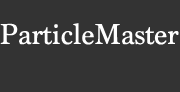
<style>
.page{position:relative;width:180px;height:92px;background:#333333}
.page>*{position:absolute;margin:0}
.t1{font:30px "Marion-Regular";color:#ffffff}
</style>
<div class="page">
<p class="t1" style="left:0px;top:23px;width:179px;height:22px">ParticleMaster</p>
</div>
